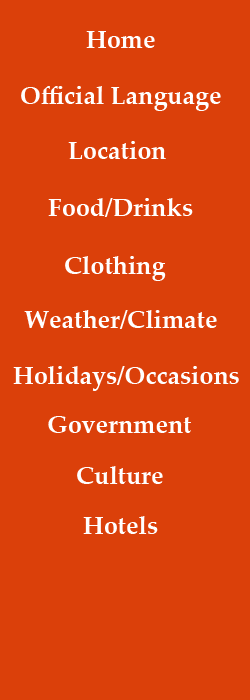
<style>
.page{position:relative;width:250px;height:700px;background:#db400a}
.page>*{position:absolute;margin:0}
.t1{font:25px "PalatinoLinotype-Bold";color:#ffffff}
</style>
<div class="page">
<p class="t1" style="left:86px;top:31px;width:69px;height:17px">Home</p>
<p class="t1" style="left:21px;top:86px;width:200px;height:25px">Official Language</p>
<p class="t1" style="left:68px;top:141px;width:98px;height:18px">Location</p>
<p class="t1" style="left:48px;top:198px;width:145px;height:19px">Food/Drinks</p>
<p class="t1" style="left:65px;top:256px;width:101px;height:25px">Clothing</p>
<p class="t1" style="left:24px;top:310px;width:193px;height:19px">Weather/Climate</p>
<p class="t1" style="left:13px;top:366px;width:226px;height:25px">Holidays/Occasions</p>
<p class="t1" style="left:48px;top:416px;width:143px;height:17px">Government</p>
<p class="t1" style="left:77px;top:466px;width:86px;height:18px">Culture</p>
<p class="t1" style="left:83px;top:516px;width:75px;height:18px">Hotels</p>
</div>
